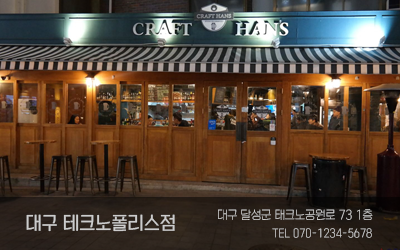
<style>
.page{position:relative;width:400px;height:250px}
.page>*{position:absolute;margin:0}
.t1{font:10.7px "KoreanYNSJG1-R";color:#cccccc}
.t2{font:17px "KoreanYNSJG3-R";color:#cccccc}
.t3{font:9.7px "KoreanYNSJG1-R";color:#cccccc}
</style>
<div class="page">
<p class="t1" style="left:218px;top:209px;width:155px;height:11px">대구 달성군 태크노공원로 73 1층</p>
<p class="t2" style="left:26px;top:214px;width:149px;height:18px">대구 테크노폴리스점</p>
<p class="t3" style="left:272px;top:228px;width:100px;height:10px">TEL 070-1234-5678</p>
</div>
